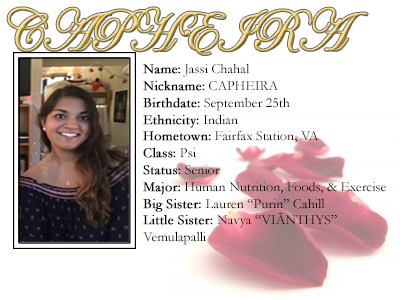
<style>
.page{position:relative;width:400px;height:300px;background:#ffffff}
.page>*{position:absolute;margin:0}
.t1{font:60px "EdwardianScriptITC";font-weight:bold;scale:0.84 1}
.t2{font:14px "Garamond";color:#000000}
.t3{font:14px "Garamond";color:#000000;font-weight:bold}
.t4{font:14px "Garamond";color:#000000;text-transform:uppercase}
</style>
<div class="page">
<p class="t1" style="left:7px;top:7px;width:361px;height:48px">CAPHEIRA</p>
<p class="t2" style="left:143px;top:63px;width:243px;height:182px"><span class="t3">Name:</span> Jassi Chahal<br><span class="t3">Nickname:</span> CAPHEIRA<br><span class="t3">Birthdate:</span> September 25th<br><span class="t3">Ethnicity:</span> Indian<br><span class="t3">Hometown:</span> Fairfax Station, VA<br><span class="t3">Class:</span> Psi<br><span class="t3">Status:</span> Senior<br><span class="t3">Major:</span> Human Nutrition, Foods, &amp; Exercise<br><span class="t3">Big Sister: </span>Lauren “Purin” Cahill<br><span class="t3">Little Sister: </span>Navya “<span class="t4">viānthys</span>” <br>Vemulapalli</p>
</div>
